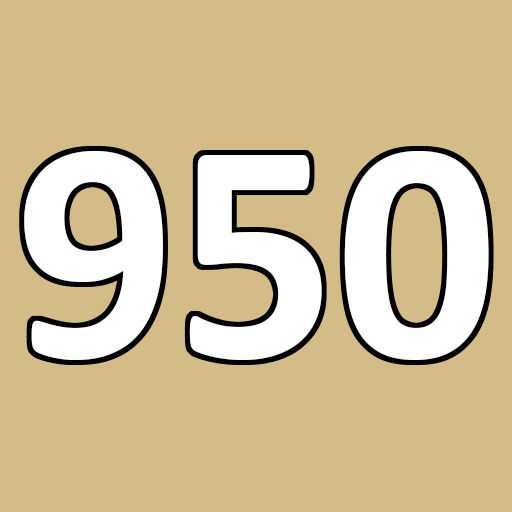
<style>
.page{position:relative;width:512px;height:512px;background:#d4bc88}
.page>*{position:absolute;margin:0}
.t1{font:317.5px "Calibri-Bold";color:#ffffff}
</style>
<div class="page">
<p class="t1" style="left:24px;top:151px;width:465px;height:209px">950</p>
</div>
